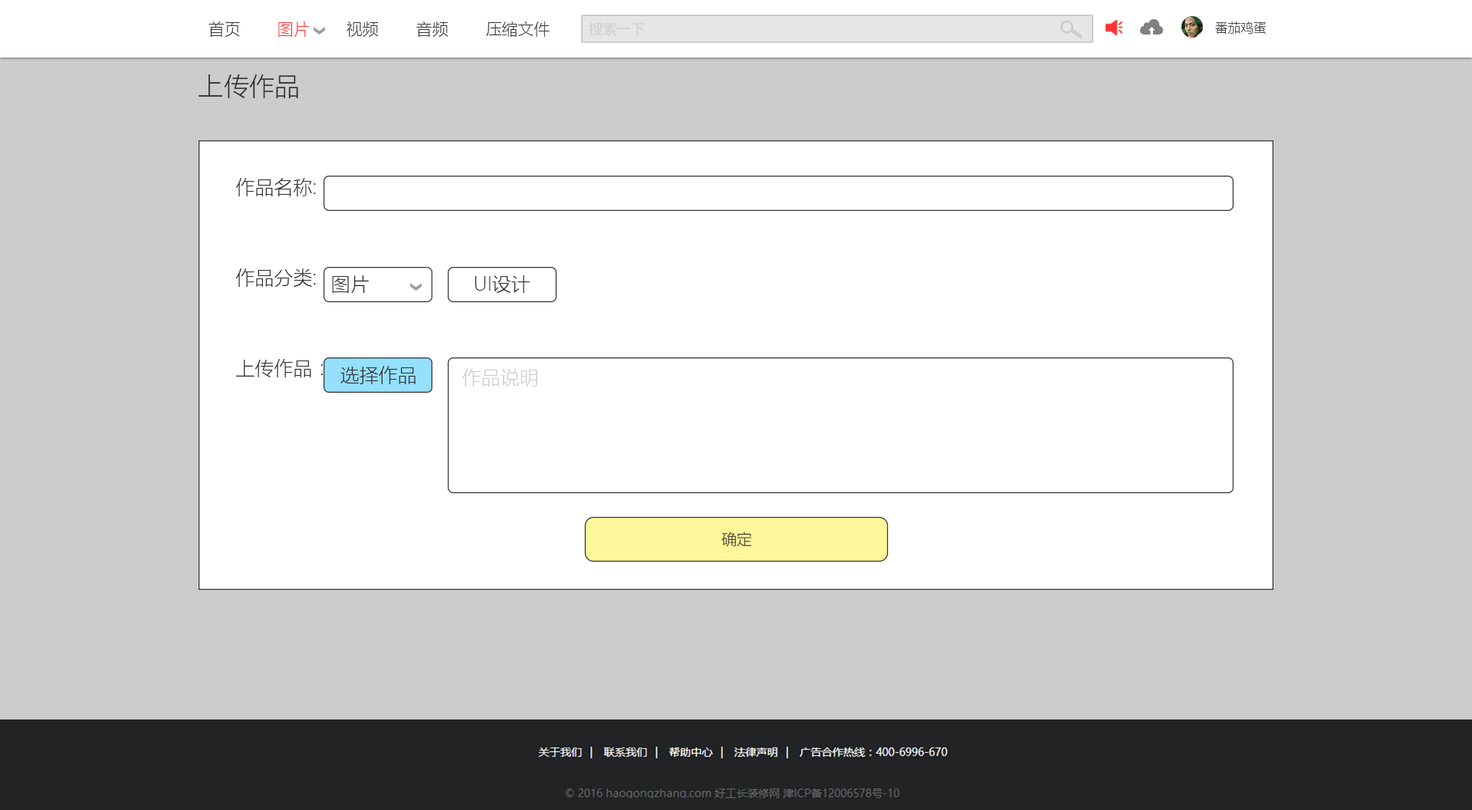
<style>
.page{position:relative;width:1472px;height:810px;background:#ffffff}
.page>*{position:absolute;margin:0}
.t1{font:16px "MicrosoftYaHeiLight";color:#333333}
.t2{font:16px "MicrosoftYaHeiLight";color:#ff3333}
.t3{font:14px "MicrosoftYaHeiLight";color:#cccccc}
.t4{font:12.8px "MicrosoftYaHeiLight";color:#333333}
.t5{font:25.6px "MicrosoftYaHeiLight";color:#333333}
.t6{font:19.2px "MicrosoftYaHeiLight";color:#333333}
.t7{font:19.2px "MicrosoftYaHeiLight";color:#cccccc}
.t8{font:15.3px "MicrosoftYaHeiLight";color:#333333}
</style>
<div class="page">
<p class="t1" style="left:209px;top:21px;width:31px;height:17px">首页</p>
<p class="t2" style="left:278px;top:21px;width:31px;height:16px">图片</p>
<p class="t1" style="left:347px;top:21px;width:32px;height:16px">视频</p>
<p class="t1" style="left:416px;top:21px;width:33px;height:16px">音频</p>
<p class="t1" style="left:486px;top:21px;width:64px;height:16px">压缩文件</p>
<p class="t3" style="left:589px;top:21px;width:56px;height:15px">搜索一下</p>
<p class="t4" style="left:1216px;top:21px;width:50px;height:13px">番茄鸡蛋</p>
<p class="t5" style="left:199px;top:74px;width:99px;height:25px">上传作品</p>
<p class="t6" style="left:236px;top:178px;width:80px;height:18px">作品名称:</p>
<p class="t6" style="left:236px;top:268px;width:80px;height:19px">作品分类:</p>
<p class="t6" style="left:332px;top:275px;width:37px;height:19px">图片</p>
<p class="t6" style="left:475px;top:275px;width:55px;height:18px">UI设计</p>
<p class="t6" style="left:236px;top:359px;width:87px;height:18px">上传作品：</p>
<p class="t6" style="left:341px;top:366px;width:75px;height:18px">选择作品</p>
<p class="t7" style="left:462px;top:368px;width:76px;height:19px">作品说明</p>
<p class="t8" style="left:722px;top:531px;width:30px;height:16px">确定</p>
</div>
